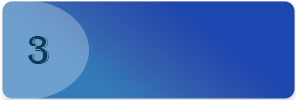
<style>
.page{position:relative;width:296px;height:100px}
.page>*{position:absolute;margin:0}
.t1{font:41.7px "Algerian";color:#093a54}
</style>
<div class="page">
<p class="t1" style="left:28px;top:36px;width:22px;height:28px">3</p>
</div>
